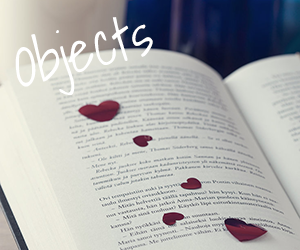
<style>
.page{position:relative;width:300px;height:250px}
.page>*{position:absolute;margin:0}
.t1{font:58.3px "ShadowsIntoLight";color:#ffffff}
</style>
<div class="page">
<p class="t1" style="left:15px;top:17px;width:138px;height:78px;rotate:-15deg">Objects</p>
</div>
